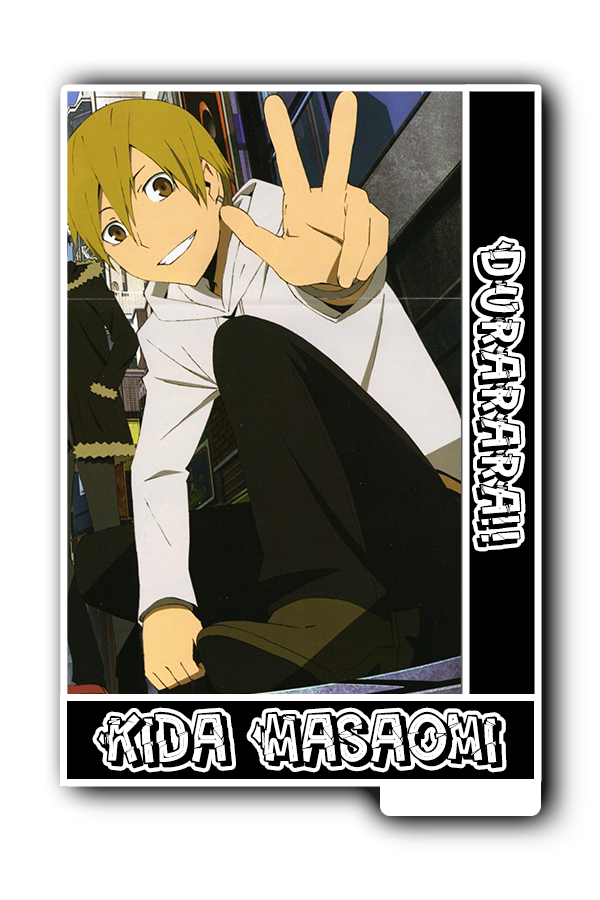
<style>
.page{position:relative;width:600px;height:900px;background:#ffffff}
.page>*{position:absolute;margin:0}
.t1{font:61px "PeintureFraiche";color:#000000}
.t2{font:75px "PeintureFraiche";color:#000000}
</style>
<div class="page">
<p class="t1" style="left:475px;top:239px;width:47px;height:309px;rotate:90deg">DURARARA!!</p>
<p class="t2" style="left:96px;top:711px;width:407px;height:58px">Kida Masaomi</p>
</div>
